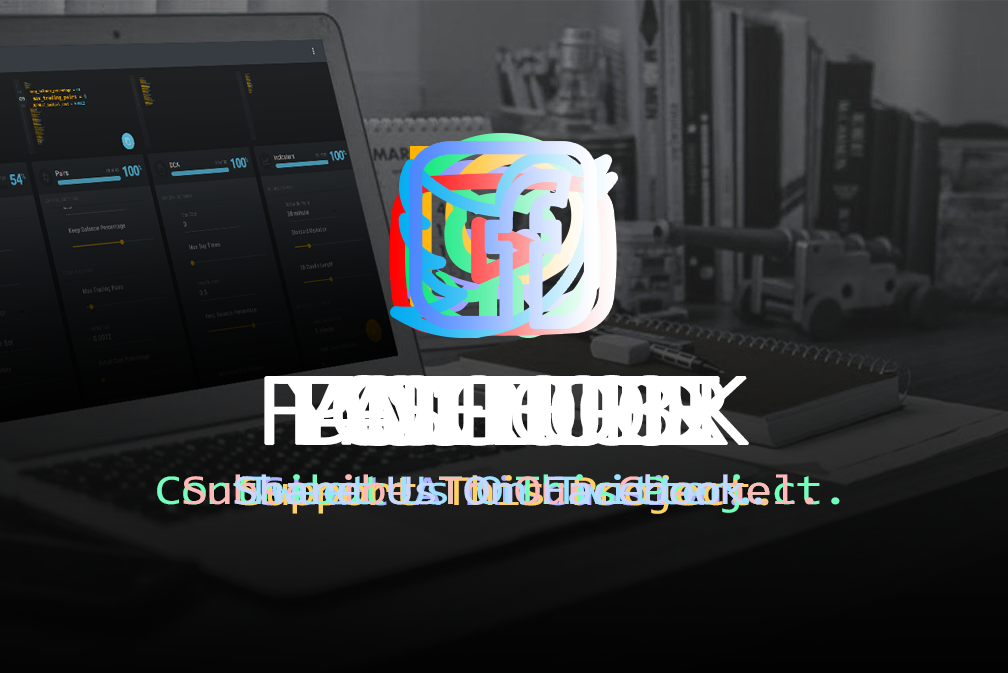
<style>
.page{position:relative;width:1008px;height:673px}
.page>*{position:absolute;margin:0}
.t1{font:93.2px "Roboto-Light";letter-spacing:-0.07em;color:#ffffff;font-weight:bold;scale:1.15 1}
.t2{font:42.9px "Consolas";letter-spacing:-0.03em;scale:1.15 1}
.t3{font:42.9px "Consolas";letter-spacing:-0.03em;color:#c6d8ff;scale:1.15 1}
.t4{font:42.9px "Consolas";letter-spacing:-0.03em;color:#9de3ff;scale:1.15 1}
</style>
<div class="page">
<p class="t1" style="left:264px;top:375px;width:485px;height:71px">FACEBOOK</p>
<p class="t2" style="left:157px;top:474px;width:683px;height:39px">Contribute To This Project.</p>
<p class="t2" style="left:183px;top:474px;width:631px;height:31px">Subscribe To Our Channel.</p>
<p class="t3" style="left:234px;top:474px;width:529px;height:31px">Share Us On Facebook.</p>
<p class="t2" style="left:240px;top:475px;width:529px;height:39px">Support This Project.</p>
<p class="t4" style="left:247px;top:474px;width:503px;height:31px">Tweet Us On Twitter.</p>
<p class="t2" style="left:262px;top:475px;width:478px;height:31px">Start A Discussion.</p>
</div>
